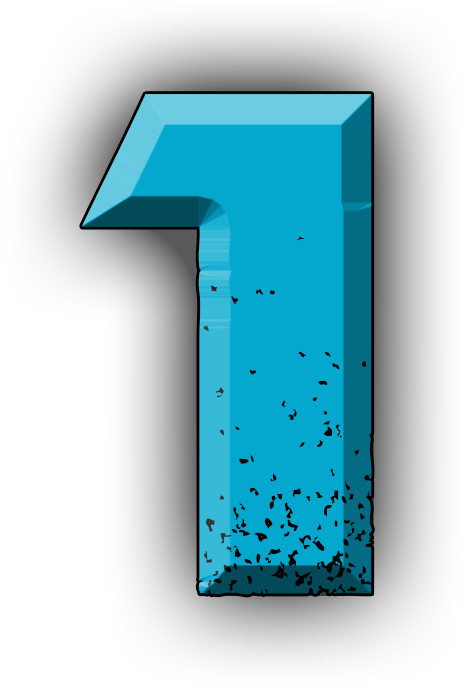
<style>
.page{position:relative;width:465px;height:686px}
.page>*{position:absolute;margin:0}
.t1{font:700px "Coalition"}
</style>
<div class="page">
<p class="t1" style="left:82px;top:94px;width:290px;height:501px">1</p>
</div>
